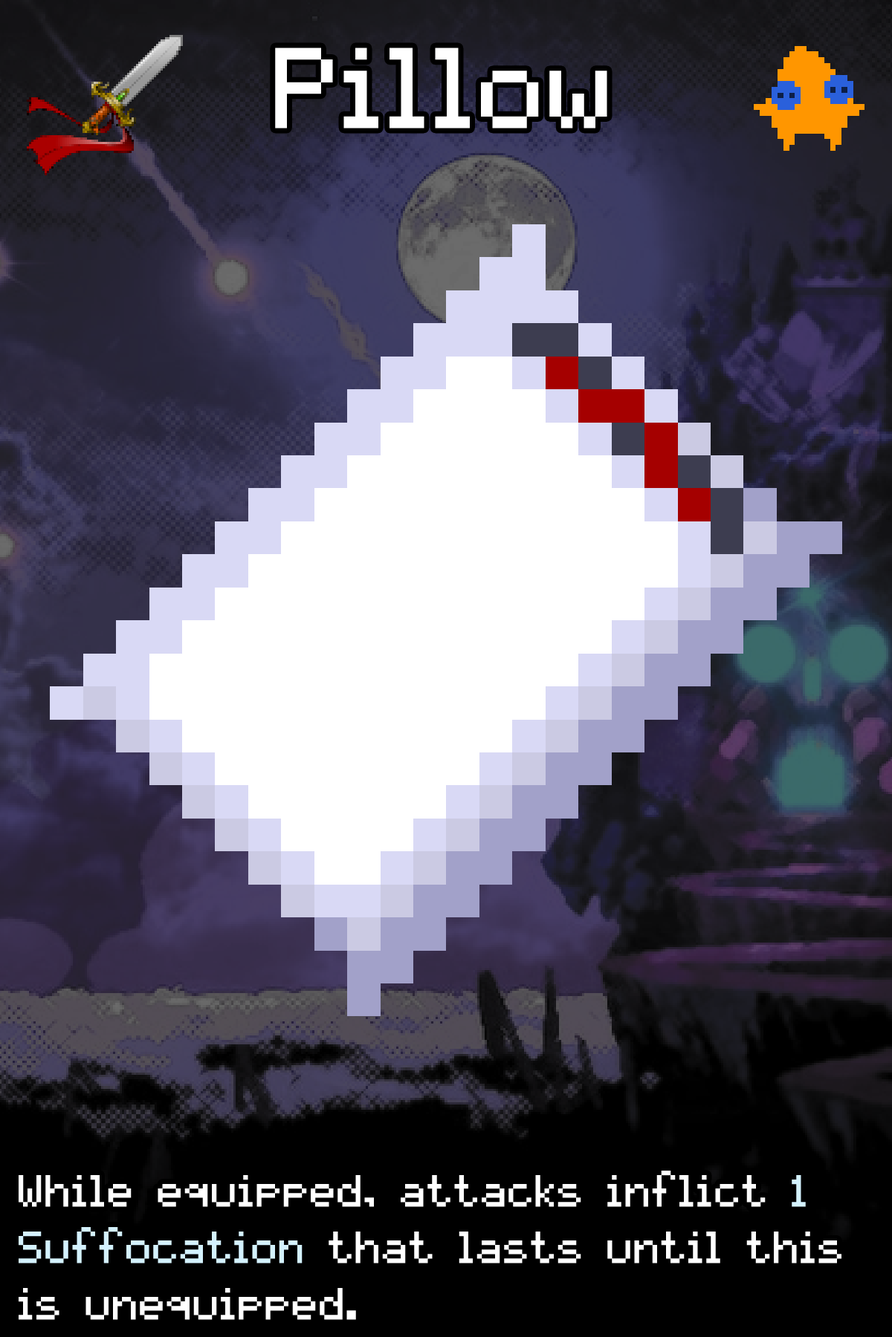
<style>
.page{position:relative;width:892px;height:1337px}
.page>*{position:absolute;margin:0}
.t1{font:156.8px "pixelmix";color:#ffffff}
.t2{font:61.7px/56.5px "pixelmix";color:#ffffff}
.t3{font:61.7px/56.5px "pixelmix";color:#d4f2ff}
</style>
<div class="page">
<p class="t1" style="left:275px;top:48px;width:332px;height:81px">Pillow</p>
<p class="t2" style="left:19px;top:1171px;width:822px;height:149px">While equipped, attacks inflict <span class="t3">1 Suffocation </span>that lasts until this is unequipped.</p>
</div>
